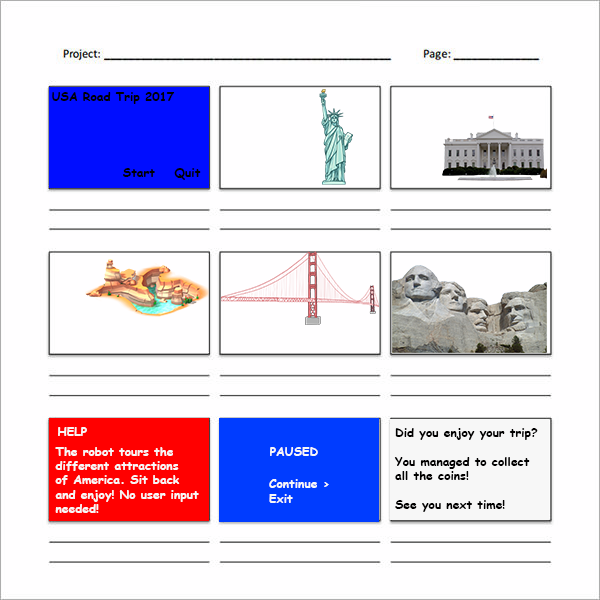
<style>
.page{position:relative;width:600px;height:600px;background:#fffeff}
.page>*{position:absolute;margin:0}
.t1{font:12px "ComicSansMS-Bold";color:#000000}
.t2{font:12px "ComicSansMS-Bold";color:#f7f7f7}
.t3{font:12px "ComicSansMS-Bold";color:#010000}
</style>
<div class="page">
<p class="t1" style="left:52px;top:92px;width:123px;height:12px">USA Road Trip 2017</p>
<p class="t1" style="left:123px;top:168px;width:32px;height:9px">Start</p>
<p class="t1" style="left:174px;top:168px;width:27px;height:12px">Quit</p>
<p class="t2" style="left:58px;top:427px;width:29px;height:9px">HELP</p>
<p class="t3" style="left:394px;top:428px;width:144px;height:84px">Did you enjoy your trip?<br><br>You managed to collect all the coins!<br><br>See you next time!</p>
<p class="t2" style="left:55px;top:447px;width:144px;height:66px">The robot tours the<br>different attractions<br>of America. Sit back<br>and enjoy! No user input<br>needed!</p>
<p class="t2" style="left:270px;top:447px;width:48px;height:9px">PAUSED</p>
<p class="t2" style="left:269px;top:479px;width:60px;height:24px">Continue &gt;<br>Exit</p>
</div>
